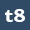
<style>
.page{position:relative;width:30px;height:30px;background:#2f4b66}
.page>*{position:absolute;margin:0}
.t1{font:18.7px "BookmanOldStyle-Bold";color:#ffffff}
</style>
<div class="page">
<p class="t1" style="left:5px;top:9px;width:20px;height:13px">t8</p>
</div>
